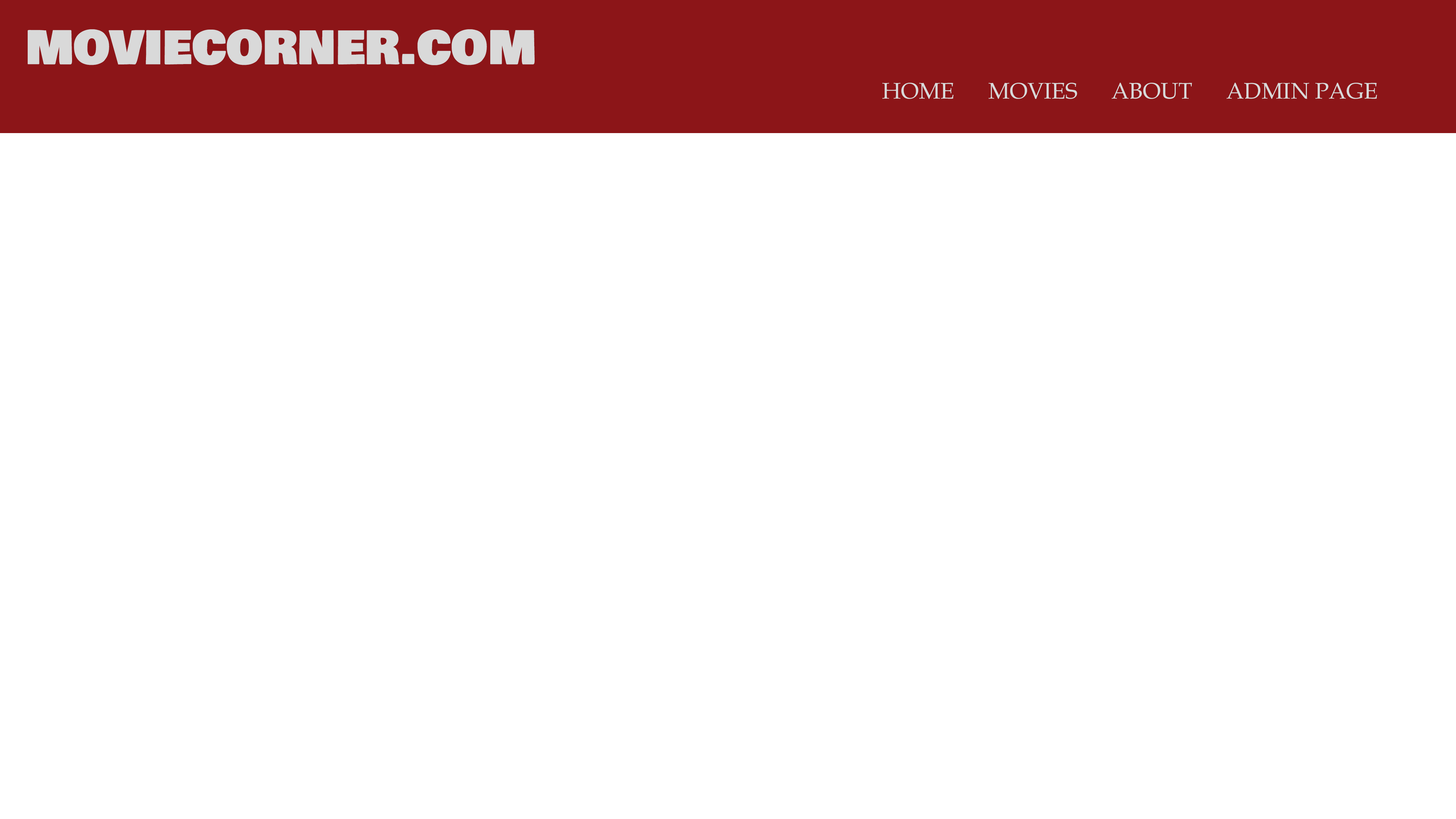
<style>
.page{position:relative;width:1456px;height:819px;background:#ffffff}
.page>*{position:absolute;margin:0}
.t1{font:45.5px "BowlbyOneSC-Regular";color:#d9d9d9}
.t2{font:22.7px "BookAntiqua";color:#d9d9d9}
</style>
<div class="page">
<p class="t1" style="left:28px;top:29px;width:507px;height:36px">MOVIECORNER.COM</p>
<p class="t2" style="left:882px;top:83px;width:495px;height:16px">HOME      MOVIES      ABOUT      ADMIN PAGE</p>
</div>
